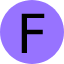
<style>
.page{position:relative;width:64px;height:64px;background:#9773ff}
.page>*{position:absolute;margin:0}
.t1{font:54px "DejaVuSans";color:#000000}
</style>
<div class="page">
<p class="t1" style="left:21px;top:13px;width:24px;height:40px">F</p>
</div>
